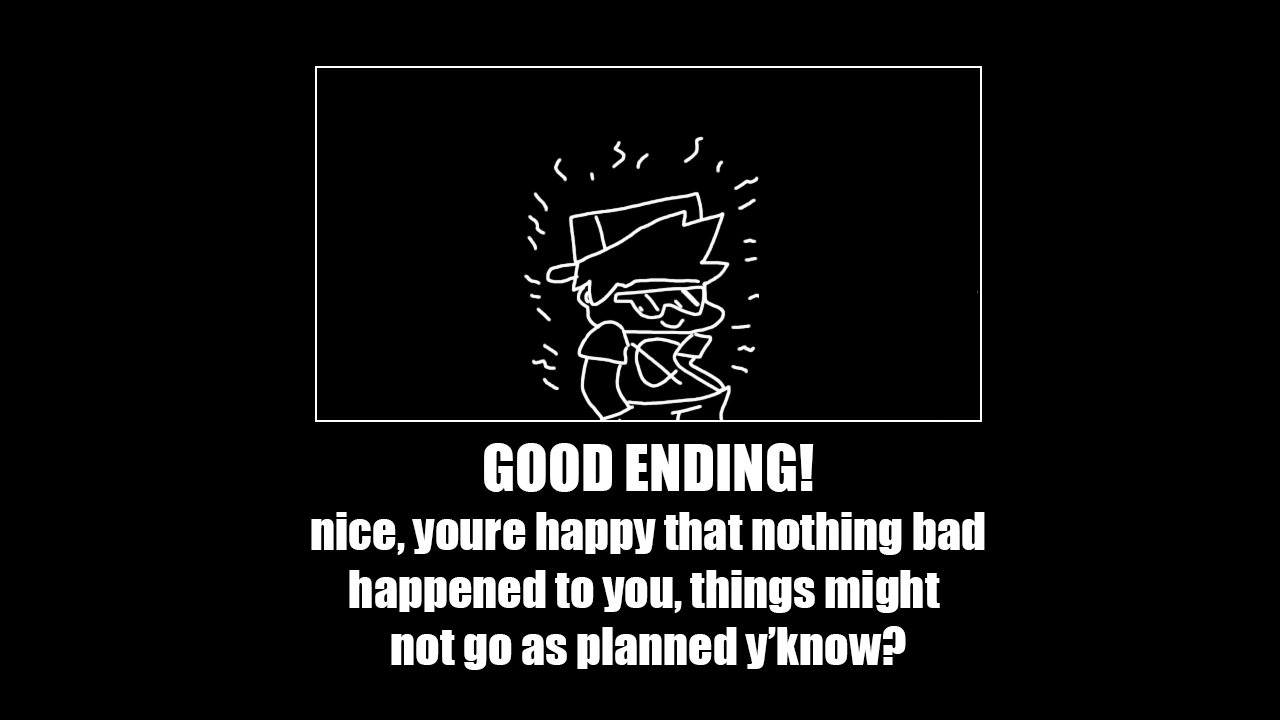
<style>
.page{position:relative;width:1280px;height:720px;background:#000000}
.page>*{position:absolute;margin:0}
.t1{font:60px "Impact";color:#ffffff}
.t2{font:48px "Impact";color:#ffffff}
</style>
<div class="page">
<p class="t1" style="left:484px;top:443px;width:330px;height:49px">GOOD ENDING!</p>
<p class="t2" style="left:311px;top:512px;width:674px;height:158px;text-align:center">nice, youre happy that nothing bad<br>happened to you, things might <br>not go as planned y’know?</p>
</div>
